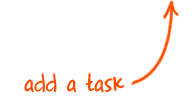
<style>
.page{position:relative;width:192px;height:100px;background:#ffffff}
.page>*{position:absolute;margin:0}
.t1{font:30px "CompleteinHim";color:#ff4e00}
</style>
<div class="page">
<p class="t1" style="left:24px;top:73px;width:101px;height:20px">add a task</p>
</div>
